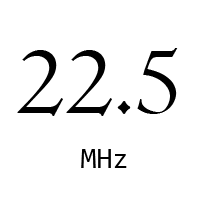
<style>
.page{position:relative;width:200px;height:200px;background:#ffffff}
.page>*{position:absolute;margin:0}
.t1{font:100px "Centaur";color:#000000}
.t2{font:29.2px "Consolas";color:#000000}
</style>
<div class="page">
<p class="t1" style="left:17px;top:48px;width:161px;height:68px">22.5</p>
<p class="t2" style="left:81px;top:149px;width:46px;height:19px">MHz</p>
</div>
